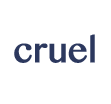
<style>
.page{position:relative;width:111px;height:104px;background:#ffffff}
.page>*{position:absolute;margin:0}
.t1{font:30.4px "BanglaMN";color:#2c385e;font-weight:bold}
</style>
<div class="page">
<p class="t1" style="left:14px;top:34px;width:81px;height:29px">cruel</p>
</div>
